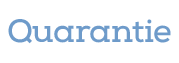
<style>
.page{position:relative;width:179px;height:63px;background:#ffffff}
.page>*{position:absolute;margin:0}
.t1{font:32.1px "NexaSlabBoldFREE";letter-spacing:-0.02em;color:#6e9bca}
</style>
<div class="page">
<p class="t1" style="left:8px;top:19px;width:163px;height:25px">Quarantie</p>
</div>
